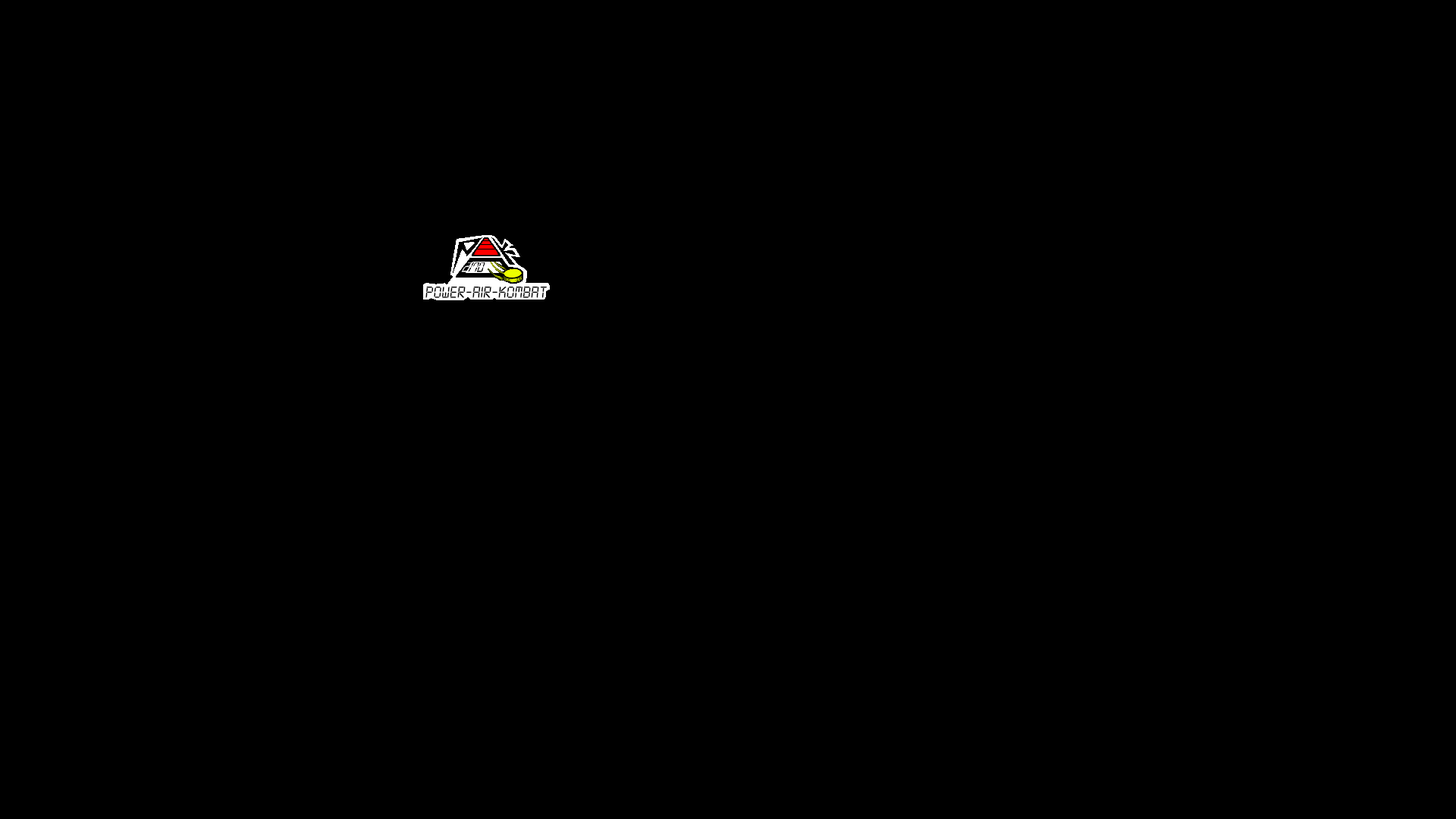
<style>
.page{position:relative;width:1456px;height:819px;background:#000000}
.page>*{position:absolute;margin:0}
.t1{font:17.2px "Digital-7Italic";color:#000000}
</style>
<div class="page">
<p class="t1" style="left:425px;top:286px;width:123px;height:12px">power-air-kombat</p>
</div>
